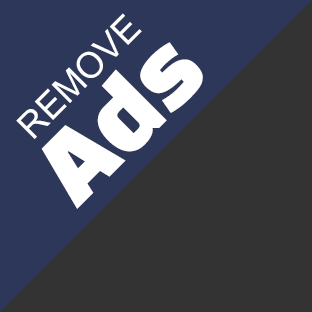
<style>
.page{position:relative;width:312px;height:312px;background:#333333}
.page>*{position:absolute;margin:0}
.t1{font:36px/80px "ArialMT";color:#ffffff}
.t2{font:90px/80px "BlackHanSans-Regular";color:#ffffff}
</style>
<div class="page">
<p class="t1" style="left:16px;top:13px;width:187px;height:196px;text-align:center;rotate:-45deg">REMOVE<br><span class="t2">Ads</span></p>
</div>
